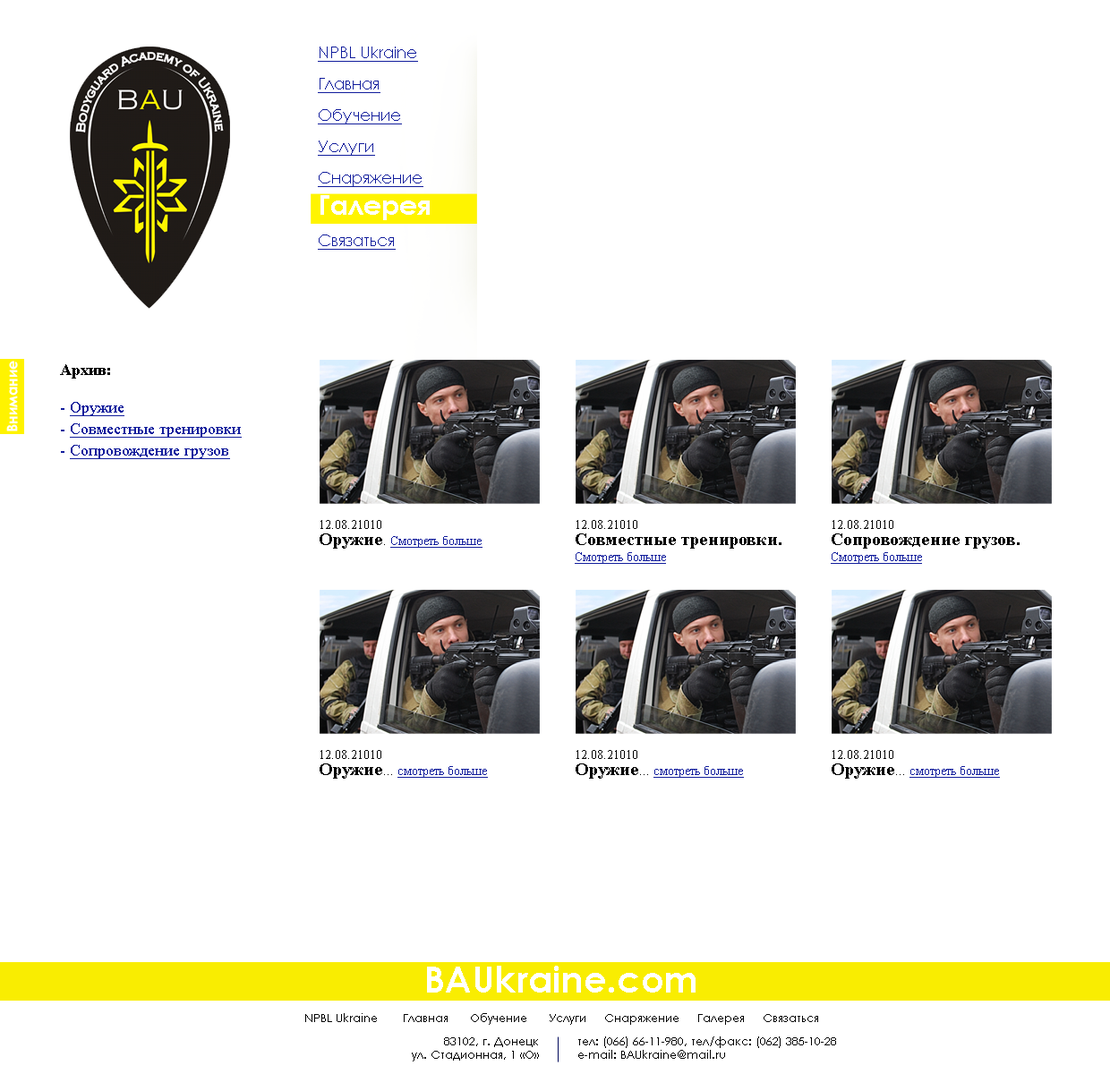
<style>
.page{position:relative;width:1110px;height:1074px;background:#ffffff}
.page>*{position:absolute;margin:0}
.t1{font:16.1px/31.3px "CenturyGothic";color:#111d9c;text-decoration:underline}
.t2{font:27.8px/31.3px "CenturyGothic-Bold";color:#ffffff}
.t3{font:14.3px "CenturyGothic-Bold";color:#ffffff}
.t4{font:16.1px/21.5px "TimesNewRomanPSMT";color:#111d9c;text-decoration:underline}
.t5{font:16.1px/16.1px "TimesNewRomanPS-BoldMT";color:#000000}
.t6{font:16.1px/21.5px "TimesNewRomanPSMT";color:#111d9c}
.t7{font:12.5px/16.1px "TimesNewRomanPSMT";color:#111d9c;text-decoration:underline}
.t8{font:12.5px/16.1px "TimesNewRomanPSMT";color:#000000}
.t9{font:17.9px/16.1px "TimesNewRomanPS-BoldMT";color:#000000}
.t10{font:15.2px/16.1px "TimesNewRomanPSMT";color:#000000}
.t11{font:36.7px "CenturyGothic-Bold";color:#ffffff}
.t12{font:11.6px "CenturyGothic";color:#000000}
</style>
<div class="page">
<p class="t1" style="left:318px;top:47px;width:112px;height:203px">NPBL Ukraine<br>Главная<br>Обучение<br>Услуги<br>Снаряжение<br><span class="t2">Галерея<br></span>Связаться</p>
<p class="t3" style="left:6px;top:361px;width:12px;height:70px;rotate:-90deg">Внимание</p>
<p class="t4" style="left:60px;top:364px;width:182px;height:95px;text-align:justify"><span class="t5">Архив:<br><br></span><span class="t6">- </span>Оружие<br><span class="t6">- </span>Совместные тренировки<br><span class="t6">- </span>Сопровождение грузов</p>
<p class="t7" style="left:320px;top:520px;width:163px;height:29px;text-align:justify"><span class="t8">12.08.21010<br></span><span class="t9">Оружие</span><span class="t10">. </span>Смотреть больше</p>
<p class="t9" style="left:575px;top:520px;width:207px;height:44px;text-align:justify"><span class="t8">12.08.21010<br></span>Совместные тренировки.<br><span class="t7">Смотреть больше</span></p>
<p class="t9" style="left:831px;top:520px;width:189px;height:44px;text-align:justify"><span class="t8">12.08.21010<br></span>Сопровождение грузов.<br><span class="t7">Смотреть больше</span></p>
<p class="t7" style="left:320px;top:750px;width:168px;height:29px;text-align:justify"><span class="t8">12.08.21010<br></span><span class="t9">Оружие</span><span class="t10">... </span>смотреть больше</p>
<p class="t7" style="left:576px;top:750px;width:168px;height:29px;text-align:justify"><span class="t8">12.08.21010<br></span><span class="t9">Оружие</span><span class="t10">... </span>смотреть больше</p>
<p class="t7" style="left:832px;top:750px;width:168px;height:29px;text-align:justify"><span class="t8">12.08.21010<br></span><span class="t9">Оружие</span><span class="t10">... </span>смотреть больше</p>
<p class="t11" style="left:427px;top:966px;width:269px;height:27px">BAUkraine.com</p>
<p class="t12" style="left:305px;top:1013px;width:513px;height:12px">NPBL Ukraine       Главная      Обучение      Услуги     Снаряжение     Галерея     Связаться</p>
<p class="t12" style="left:412px;top:1038px;width:127px;height:24px;text-align:right">83102, г. Донецк<br>ул. Стадионная, 1 «О»</p>
<p class="t12" style="left:578px;top:1037px;width:258px;height:22px">тел: (066) 66-11-980, тел/факс: (062) 385-10-28<br>e-mail: BAUkraine@mail.ru</p>
</div>
